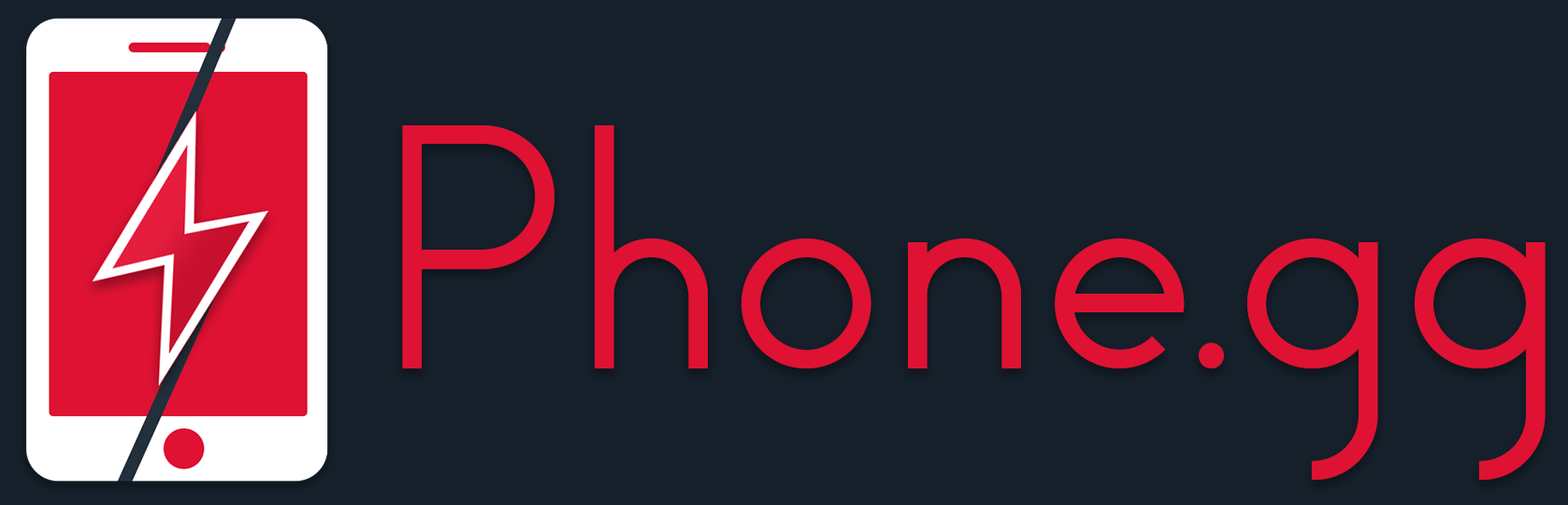
<style>
.page{position:relative;width:1568px;height:505px;background:#15202b}
.page>*{position:absolute;margin:0}
.t1{font:323.7px "BigJohnPRO-Regular";color:#df1233}
</style>
<div class="page">
<p class="t1" style="left:402px;top:125px;width:1144px;height:355px">Phone.gg</p>
</div>
